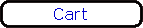
<style>
.page{position:relative;width:143px;height:28px;background:#ffffff}
.page>*{position:absolute;margin:0}
.t1{font:16px "Verdana";color:#0000cc}
</style>
<div class="page">
<p class="t1" style="left:54px;top:8px;width:33px;height:12px">Cart</p>
</div>
